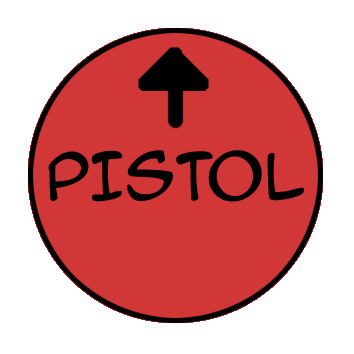
<style>
.page{position:relative;width:354px;height:354px;background:#ffffff}
.page>*{position:absolute;margin:0}
.t1{font:58.7px "AnimeAce2.0BB";color:#000000}
</style>
<div class="page">
<p class="t1" style="left:48px;top:150px;width:256px;height:52px">PISTOL</p>
</div>
